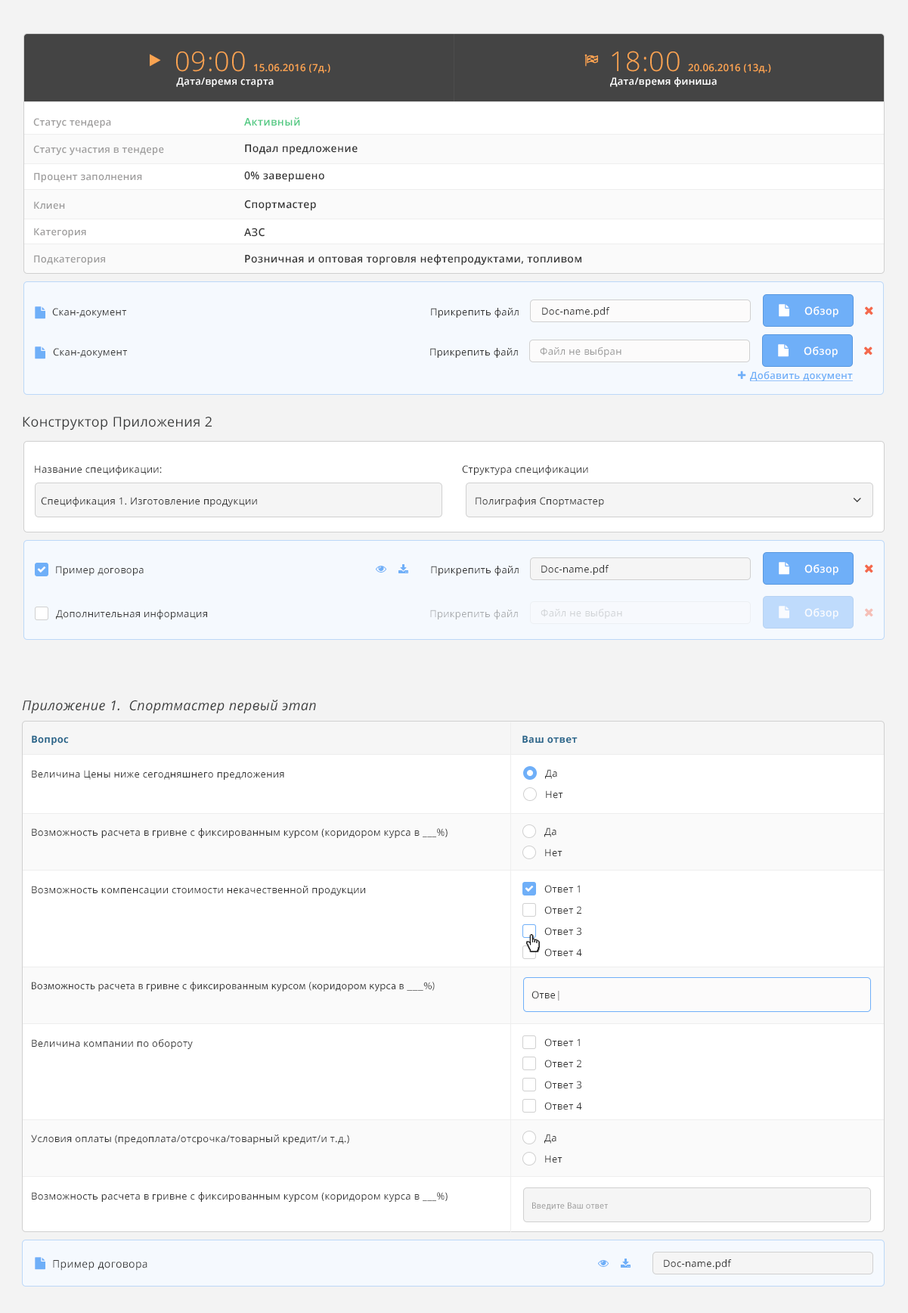
<style>
.page{position:relative;width:908px;height:1313px;background:#ffffff}
.page>*{position:absolute;margin:0}
.t1{font:27.2px "OpenSans-Light";letter-spacing:0.025em;color:#faa351}
.t2{font:9.8px "OpenSans-Semibold";letter-spacing:0.025em;color:#faa351}
.t3{font:9.8px "OpenSans-Semibold";letter-spacing:0.025em;color:#ffffff}
.t4{font:9.8px "OpenSans-Semibold";letter-spacing:0.025em;color:#9e9d9d}
.t5{font:10.5px "OpenSans-Semibold";letter-spacing:0.025em;color:#4bc87f}
.t6{font:10.5px "OpenSans-Semibold";letter-spacing:0.025em;color:#333333}
.t7{font:9.8px "OpenSans";letter-spacing:0.025em;color:#333333}
.t8{font:10.6px "OpenSans-Semibold";letter-spacing:0.025em;color:#ffffff}
.t9{font:9.8px "OpenSans";letter-spacing:0.025em;color:#999999}
.t10{font:9.8px "OpenSans-Semibold";letter-spacing:0.025em;color:#6faff8;text-decoration:underline}
.t11{font:13.6px "OpenSans";letter-spacing:0.025em;color:#373838}
.t12{font:9.8px "OpenSans";letter-spacing:0.025em;color:#3a3a3a}
.t13{font:9.8px "OpenSans";letter-spacing:0.025em;color:#a7aaad}
.t14{font:9.8px "OpenSans";letter-spacing:0.025em;color:#d0d3d6}
.t15{font:13.6px "OpenSans-Italic";letter-spacing:0.025em;color:#373838}
.t16{font:9.8px "OpenSans-Bold";letter-spacing:0.025em;color:#29668b}
.t17{font:10.5px "MyriadPro-Regular";letter-spacing:0.025em;color:#3a3a3a}
.t18{font:9px "MyriadPro-Regular";letter-spacing:0.025em;color:#999999}
.t19{font:10.6px "OpenSans";letter-spacing:0.025em;color:#3a3a3a}
</style>
<div class="page">
<p class="t1" style="left:176px;top:51px;width:69px;height:21px">09:00</p>
<p class="t1" style="left:612px;top:51px;width:68px;height:21px">18:00</p>
<p class="t2" style="left:254px;top:64px;width:76px;height:9px">15.06.2016 (7д.)</p>
<p class="t2" style="left:688px;top:64px;width:83px;height:9px">20.06.2016 (13д.)</p>
<p class="t3" style="left:176px;top:77px;width:98px;height:10px">Дата/время старта</p>
<p class="t3" style="left:610px;top:77px;width:107px;height:10px">Дата/время финиша</p>
<p class="t4" style="left:33px;top:118px;width:78px;height:10px">Статус тендера</p>
<p class="t5" style="left:244px;top:117px;width:56px;height:9px">Активный</p>
<p class="t4" style="left:33px;top:145px;width:131px;height:10px">Статус участия в тендере</p>
<p class="t6" style="left:245px;top:144px;width:113px;height:11px">Подал предложение</p>
<p class="t4" style="left:34px;top:172px;width:108px;height:10px">Процент заполнения</p>
<p class="t6" style="left:244px;top:171px;width:80px;height:11px">0% завершено</p>
<p class="t4" style="left:34px;top:201px;width:31px;height:8px">Клиен</p>
<p class="t6" style="left:244px;top:200px;width:72px;height:11px">Спортмастер</p>
<p class="t4" style="left:34px;top:228px;width:52px;height:9px">Категория</p>
<p class="t6" style="left:244px;top:228px;width:21px;height:9px">АЗС</p>
<p class="t4" style="left:34px;top:255px;width:71px;height:10px">Подкатегория</p>
<p class="t6" style="left:245px;top:254px;width:337px;height:11px">Розничная и оптовая торговля нефтепродуктами, топливом</p>
<p class="t7" style="left:52px;top:308px;width:74px;height:10px">Скан-документ</p>
<p class="t7" style="left:431px;top:308px;width:88px;height:10px">Прикрепить файл</p>
<p class="t7" style="left:542px;top:307px;width:68px;height:10px">Doc-name.pdf</p>
<p class="t8" style="left:805px;top:306px;width:34px;height:12px">Обзор</p>
<p class="t7" style="left:53px;top:348px;width:74px;height:10px">Скан-документ</p>
<p class="t7" style="left:430px;top:348px;width:88px;height:10px">Прикрепить файл</p>
<p class="t9" style="left:540px;top:347px;width:82px;height:10px">Файл не выбран</p>
<p class="t8" style="left:804px;top:346px;width:34px;height:12px">Обзор</p>
<p class="t10" style="left:750px;top:371px;width:103px;height:10px">Добавить документ</p>
<p class="t11" style="left:23px;top:417px;width:189px;height:13px">Конструктор Приложения 2</p>
<p class="t7" style="left:35px;top:465px;width:127px;height:10px">Название спецификации:</p>
<p class="t7" style="left:462px;top:465px;width:126px;height:10px">Структура спецификации</p>
<p class="t7" style="left:41px;top:497px;width:216px;height:10px">Спецификация 1. Изготовление продукции</p>
<p class="t7" style="left:476px;top:497px;width:128px;height:10px">Полиграфия Спортмастер</p>
<p class="t12" style="left:56px;top:566px;width:88px;height:10px">Пример договора</p>
<p class="t7" style="left:431px;top:566px;width:88px;height:10px">Прикрепить файл</p>
<p class="t7" style="left:541px;top:565px;width:69px;height:10px">Doc-name.pdf</p>
<p class="t8" style="left:805px;top:564px;width:34px;height:12px">Обзор</p>
<p class="t12" style="left:56px;top:610px;width:151px;height:9px">Дополнительная информация</p>
<p class="t13" style="left:430px;top:610px;width:88px;height:9px">Прикрепить файл</p>
<p class="t14" style="left:541px;top:609px;width:81px;height:10px">Файл не выбран</p>
<p class="t8" style="left:805px;top:608px;width:34px;height:11px">Обзор</p>
<p class="t15" style="left:22px;top:700px;width:294px;height:14px">Приложение 1.  Спортмастер первый этап</p>
<p class="t16" style="left:32px;top:735px;width:37px;height:10px">Вопрос</p>
<p class="t16" style="left:523px;top:735px;width:55px;height:8px">Ваш ответ</p>
<p class="t7" style="left:32px;top:770px;width:252px;height:10px">Величина Цены ниже сегодняшнего предложения</p>
<p class="t7" style="left:545px;top:769px;width:12px;height:10px">Да</p>
<p class="t7" style="left:546px;top:790px;width:17px;height:9px">Нет</p>
<p class="t7" style="left:32px;top:828px;width:416px;height:10px">Возможность расчета в гривне с фиксированным курсом (коридором курса в ___%)</p>
<p class="t7" style="left:545px;top:827px;width:12px;height:10px">Да</p>
<p class="t7" style="left:545px;top:849px;width:18px;height:8px">Нет</p>
<p class="t7" style="left:32px;top:886px;width:333px;height:9px">Возможность компенсации стоимости некачественной продукции</p>
<p class="t7" style="left:545px;top:885px;width:35px;height:8px">Ответ 1</p>
<p class="t7" style="left:545px;top:906px;width:37px;height:8px">Ответ 2</p>
<p class="t7" style="left:545px;top:927px;width:37px;height:8px">Ответ 3</p>
<p class="t7" style="left:545px;top:948px;width:37px;height:9px">Ответ 4</p>
<p class="t17" style="left:32px;top:982px;width:403px;height:9px">Возможность расчета в гривне с фиксированным курсом (коридором курса в ___%)</p>
<p class="t7" style="left:532px;top:991px;width:28px;height:10px">Отве|</p>
<p class="t7" style="left:32px;top:1039px;width:161px;height:10px">Величина компании по обороту</p>
<p class="t7" style="left:545px;top:1038px;width:35px;height:9px">Ответ 1</p>
<p class="t7" style="left:545px;top:1060px;width:37px;height:8px">Ответ 2</p>
<p class="t7" style="left:545px;top:1081px;width:37px;height:8px">Ответ 3</p>
<p class="t7" style="left:545px;top:1102px;width:37px;height:8px">Ответ 4</p>
<p class="t7" style="left:545px;top:1134px;width:12px;height:9px">Да</p>
<p class="t7" style="left:31px;top:1134px;width:318px;height:10px">Условия оплаты (предоплата/отсрочка/товарный кредит/и т.д.)</p>
<p class="t7" style="left:545px;top:1155px;width:18px;height:8px">Нет</p>
<p class="t7" style="left:32px;top:1192px;width:416px;height:10px">Возможность расчета в гривне с фиксированным курсом (коридором курса в ___%)</p>
<p class="t18" style="left:532px;top:1202px;width:76px;height:8px">Введите Ваш ответ</p>
<p class="t19" style="left:53px;top:1260px;width:94px;height:11px">Пример договора</p>
<p class="t7" style="left:664px;top:1259px;width:68px;height:10px">Doc-name.pdf</p>
</div>
